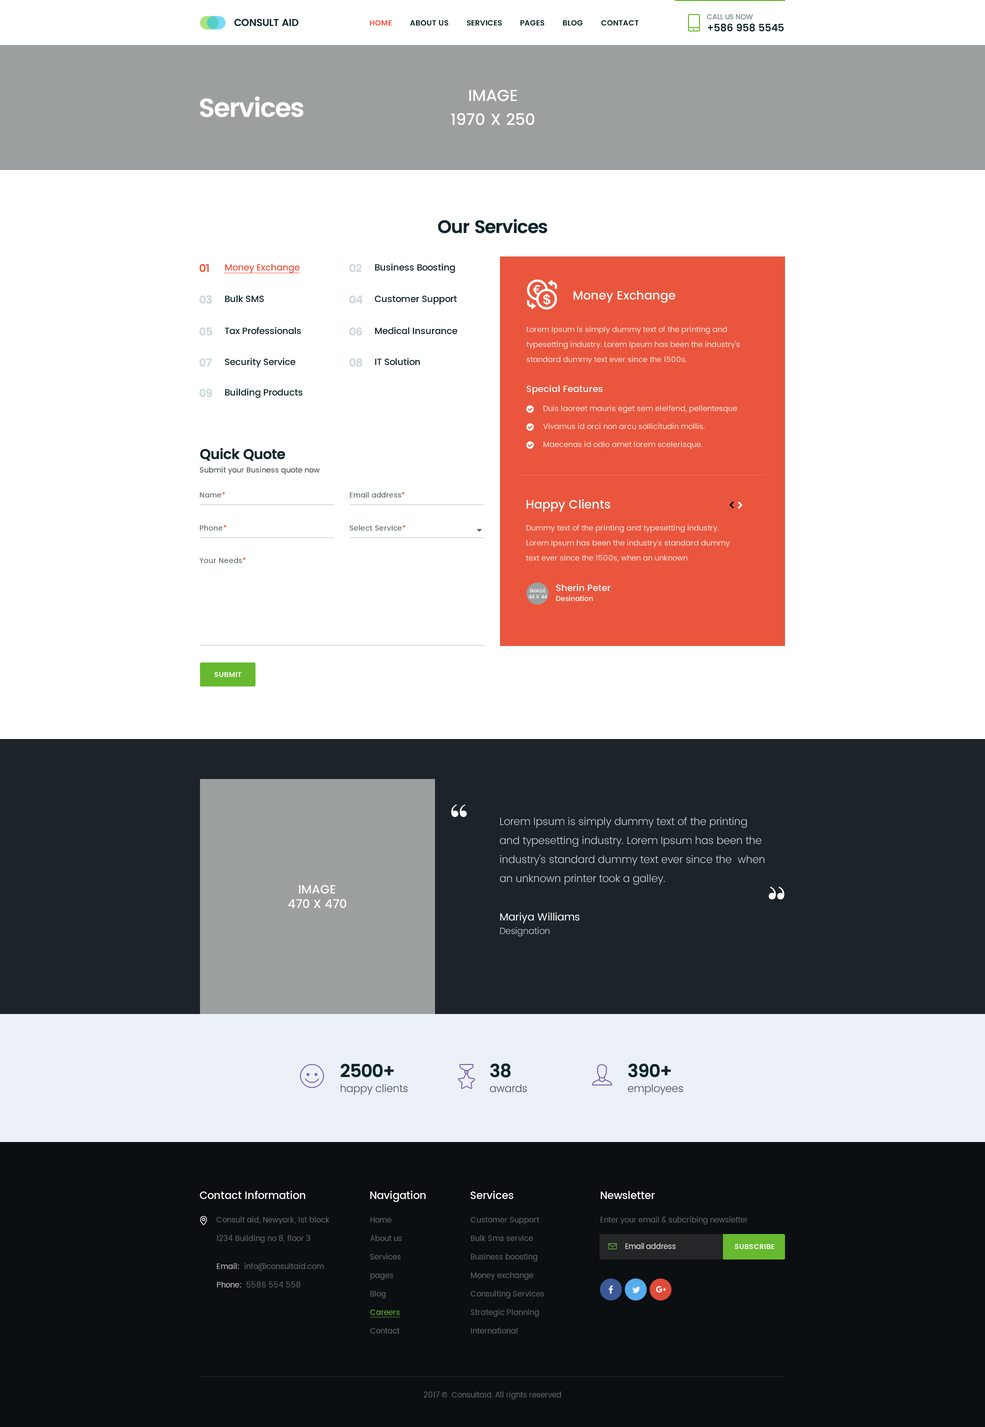
<style>
.page{position:relative;width:985px;height:1427px;background:#ffffff}
.page>*{position:absolute;margin:0}
.t1{font:10px "Poppins-Medium";letter-spacing:-0.005em;color:#10242b;text-transform:uppercase}
.t2{font:7px "Poppins-Regular";letter-spacing:-0.005em;color:#718389;text-transform:uppercase}
.t3{font:7.5px "Poppins-SemiBold";color:#10242b;text-transform:uppercase}
.t4{font:7.5px "Poppins-SemiBold";color:#e9563d;text-transform:uppercase}
.t5{font:16px/24px "Poppins-Medium";color:#ffffff;text-transform:uppercase}
.t6{font:26.1px "Poppins-SemiBold";letter-spacing:-0.03em;color:#ffffff}
.t7{font:18px "Poppins-SemiBold";letter-spacing:-0.03em;color:#10242b}
.t8{font:11px "Poppins-SemiBold";letter-spacing:-0.03em;color:#e9563d}
.t9{font:9px "Poppins-Medium";letter-spacing:-0.01em;color:#e9563d;text-decoration:underline}
.t10{font:11px "Poppins-SemiBold";letter-spacing:-0.03em;color:#cdd9dc}
.t11{font:9px "Poppins-Medium";letter-spacing:-0.01em;color:#10242b}
.t12{font:12px "Poppins-Medium";color:#ffffff}
.t13{font:7.5px/15px "Poppins-Regular";letter-spacing:0.01em;color:#ffe8e4}
.t14{font:9px "Poppins-Medium";letter-spacing:0.01em;color:#ffffff}
.t15{font:7.5px/18px "Poppins-Regular";letter-spacing:0.01em;color:#ffe8e4}
.t16{font:14px "Poppins-SemiBold";letter-spacing:-0.025em;color:#10242b}
.t17{font:7.5px "Poppins-Regular";letter-spacing:0.01em;color:#5c666a}
.t18{font:7px "Poppins-Regular";letter-spacing:0.05em;color:#5c666a}
.t19{font:7px "Poppins-Regular";letter-spacing:0.05em;color:#e9563d}
.t20{font:5px "Poppins-Medium";color:#ffffff;text-transform:uppercase}
.t21{font:9px/10px "Poppins-Medium";color:#ffffff}
.t22{font:7px/10px "Poppins-Medium";color:#ffffff}
.t23{font:7px "Poppins-SemiBold";letter-spacing:0.025em;color:#ffffff;text-transform:uppercase}
.t24{font:50px "PlayfairDisplay-Regular";letter-spacing:-0.01em;color:#ffffff}
.t25{font:10.5px/19px "Poppins-Light";letter-spacing:-0.01em;color:#cdd3d8}
.t26{font:12px "Poppins-Medium";color:#ffffff;text-transform:uppercase}
.t27{font:50.2px "PlayfairDisplay-Regular";letter-spacing:-0.01em;color:#ffffff}
.t28{font:10.5px "Poppins-Regular";letter-spacing:-0.01em;color:#ffffff}
.t29{font:9px "Poppins-Light";letter-spacing:-0.01em;color:#cdd3d8}
.t30{font:10.5px/14.9px "Poppins-Light";letter-spacing:-0.01em;color:#5c666a}
.t31{font:17.9px/14.9px "Poppins-SemiBold";letter-spacing:-0.03em;color:#10242b}
.t32{font:10.5px "Poppins-Medium";letter-spacing:-0.01em;color:#ffffff}
.t33{font:7.5px/18.5px "Poppins-Regular";letter-spacing:0.01em;color:#64676a}
.t34{font:7.5px/18.5px "Poppins-Regular";color:#64676a}
.t35{font:7.5px/18.5px "Poppins-Regular";color:#67b930;text-decoration:underline}
.t36{font:7.5px "Poppins-Regular";color:#64676a}
.t37{font:7.2px "Poppins-Regular";color:#ececec}
.t38{font:7.5px/18.5px "Poppins-Regular";letter-spacing:0.01em;color:#c5c5c5}
.t39{font:7.5px/18.5px "Poppins-Regular";letter-spacing:0.01em;color:#c4c4c4}
</style>
<div class="page">
<p class="t1" style="left:707px;top:14px;width:77px;height:18px"><span class="t2">Call us now<br></span>+586 958 5545</p>
<p class="t3" style="left:370px;top:20px;width:269px;height:6px"><span class="t4">Home</span>         about us         services         Pages         blog         contact</p>
<p class="t5" style="left:451px;top:90px;width:83px;height:35px;text-align:center">Image<br>1970 x 250</p>
<p class="t6" style="left:200px;top:96px;width:104px;height:22px">Services</p>
<p class="t7" style="left:438px;top:218px;width:110px;height:16px">Our Services</p>
<p class="t8" style="left:200px;top:264px;width:9px;height:8px">01</p>
<p class="t9" style="left:224px;top:264px;width:76px;height:10px">Money Exchange</p>
<p class="t10" style="left:350px;top:264px;width:12px;height:8px">02</p>
<p class="t11" style="left:375px;top:264px;width:80px;height:9px">Business Boosting</p>
<p class="t12" style="left:574px;top:290px;width:102px;height:13px">Money Exchange</p>
<p class="t10" style="left:200px;top:295px;width:12px;height:9px">03</p>
<p class="t11" style="left:225px;top:295px;width:39px;height:7px">Bulk SMS</p>
<p class="t10" style="left:350px;top:296px;width:13px;height:8px">04</p>
<p class="t11" style="left:374px;top:296px;width:83px;height:8px">Customer Support</p>
<p class="t10" style="left:200px;top:327px;width:12px;height:9px">05</p>
<p class="t11" style="left:224px;top:327px;width:77px;height:7px">Tax Professionals</p>
<p class="t10" style="left:350px;top:327px;width:12px;height:9px">06</p>
<p class="t11" style="left:375px;top:327px;width:83px;height:7px">Medical Insurance</p>
<p class="t13" style="left:526px;top:326px;width:214px;height:38px">Lorem Ipsum is simply dummy text of the printing and typesetting industry. Lorem Ipsum has been the industry's standard dummy text ever since the 1500s.</p>
<p class="t10" style="left:200px;top:358px;width:12px;height:8px">07</p>
<p class="t11" style="left:225px;top:358px;width:71px;height:10px">Security Service</p>
<p class="t10" style="left:350px;top:358px;width:12px;height:9px">08</p>
<p class="t11" style="left:375px;top:358px;width:45px;height:8px">IT Solution</p>
<p class="t10" style="left:200px;top:388px;width:12px;height:9px">09</p>
<p class="t11" style="left:225px;top:388px;width:77px;height:10px">Building Products</p>
<p class="t14" style="left:526px;top:385px;width:76px;height:9px">Special Features</p>
<p class="t15" style="left:543px;top:405px;width:194px;height:44px">Duis laoreet mauris eget sem eleifend, pellentesque<br>Vivamus id orci non arcu sollicitudin mollis.<br>Maecenas id odio amet lorem scelerisque.</p>
<p class="t16" style="left:200px;top:448px;width:85px;height:13px">Quick Quote</p>
<p class="t17" style="left:200px;top:466px;width:120px;height:8px">Submit your Business quote now</p>
<p class="t18" style="left:200px;top:492px;width:25px;height:6px">Name<span class="t19">*</span></p>
<p class="t18" style="left:350px;top:492px;width:55px;height:6px">Email address<span class="t19">*</span></p>
<p class="t12" style="left:526px;top:499px;width:84px;height:13px">Happy Clients</p>
<p class="t18" style="left:200px;top:525px;width:26px;height:5px">Phone<span class="t19">*</span></p>
<p class="t18" style="left:350px;top:525px;width:56px;height:5px">Select Service<span class="t19">*</span></p>
<p class="t13" style="left:526px;top:524px;width:204px;height:38px">Dummy text of the printing and typesetting industry. Lorem Ipsum has been the industry's standard dummy text ever since the 1500s, when an unknown</p>
<p class="t18" style="left:200px;top:558px;width:46px;height:5px">Your Needs<span class="t19">*</span></p>
<p class="t20" style="left:528px;top:588px;width:19px;height:10px;text-align:center">Image<br>44 x 44</p>
<p class="t21" style="left:556px;top:584px;width:54px;height:18px">Sherin Peter<br><span class="t22">Desination</span></p>
<p class="t23" style="left:214px;top:672px;width:28px;height:5px">Submit</p>
<p class="t24" style="left:451px;top:804px;width:16px;height:13px">“</p>
<p class="t25" style="left:500px;top:817px;width:264px;height:68px">Lorem Ipsum is simply dummy text of the printing and typesetting industry. Lorem Ipsum has been the industry's standard dummy text ever since the  when an unknown printer took a galley.</p>
<p class="t26" style="left:288px;top:885px;width:58px;height:23px;text-align:center">Image<br>470 x 470</p>
<p class="t27" style="left:768px;top:886px;width:16px;height:14px;rotate:180deg">“</p>
<p class="t28" style="left:500px;top:912px;width:80px;height:12px">Mariya Williams</p>
<p class="t29" style="left:500px;top:927px;width:50px;height:9px">Designation</p>
<p class="t30" style="left:340px;top:1064px;width:68px;height:31px"><span class="t31">2500+<br></span>happy clients</p>
<p class="t30" style="left:490px;top:1064px;width:37px;height:28px"><span class="t31">38<br></span>awards</p>
<p class="t30" style="left:628px;top:1064px;width:55px;height:31px"><span class="t31">390+<br></span>employees</p>
<p class="t32" style="left:200px;top:1190px;width:106px;height:9px">Contact Information</p>
<p class="t32" style="left:370px;top:1190px;width:56px;height:12px">Navigation</p>
<p class="t32" style="left:470px;top:1190px;width:44px;height:9px">Services</p>
<p class="t32" style="left:600px;top:1191px;width:55px;height:8px">Newsletter</p>
<p class="t33" style="left:216px;top:1216px;width:114px;height:27px">Consult aid, Newyork, 1st block <br>1234 Building no 8, floor 3</p>
<p class="t34" style="left:370px;top:1217px;width:32px;height:117px">Home<br>About us<br>Services<br>pages<br>Blog<br><span class="t35">Careers<br></span>Contact</p>
<p class="t33" style="left:470px;top:1217px;width:74px;height:117px">Customer Support<br>Bulk Sms service<br>Business boosting<br>Money exchange<br>Consulting Services<br>Strategic Planning<br>International</p>
<p class="t36" style="left:600px;top:1216px;width:148px;height:8px">Enter your email &amp; subcribing newsletter</p>
<p class="t37" style="left:626px;top:1243px;width:50px;height:6px">Email address</p>
<p class="t23" style="left:734px;top:1244px;width:40px;height:5px">Subscribe</p>
<p class="t33" style="left:217px;top:1263px;width:107px;height:25px"><span class="t38">Email:</span>  info@consultaid.com<br><span class="t39">Phone:</span>  5586 554 558</p>
<p class="t36" style="left:424px;top:1392px;width:137px;height:8px">2017 ©  Consultaid. All rights reserved</p>
</div>
